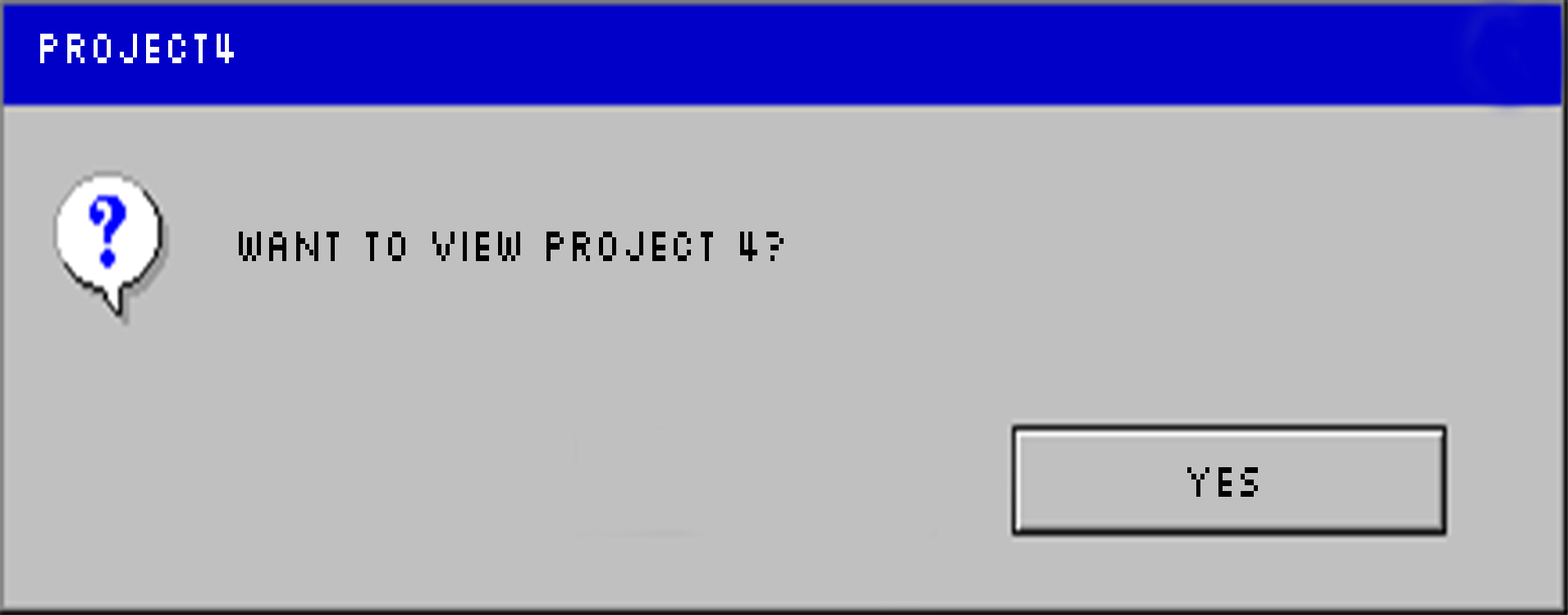
<style>
.page{position:relative;width:1568px;height:615px;background:#c0c0c0}
.page>*{position:absolute;margin:0}
.t1{font:49.2px "Silkscreen";color:#ffffff;scale:0.75 1}
.t2{font:49.2px "Silkscreen";color:#000000;scale:0.75 1}
</style>
<div class="page">
<p class="t1" style="left:40px;top:34px;width:194px;height:29px">project4</p>
<p class="t2" style="left:239px;top:231px;width:545px;height:30px">want to view project 4?</p>
<p class="t2" style="left:1187px;top:467px;width:71px;height:29px">YES</p>
</div>
